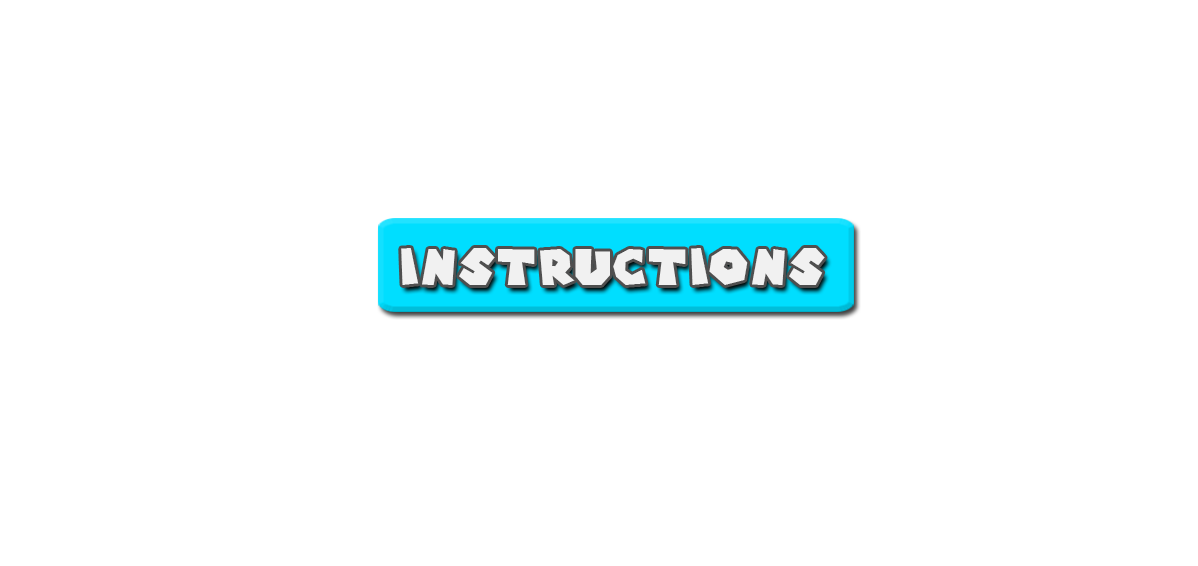
<style>
.page{position:relative;width:1198px;height:566px;background:#ffffff}
.page>*{position:absolute;margin:0}
.t1{font:49.3px "SuperMarioGalaxy";letter-spacing:0.06em;color:#ffffff}
</style>
<div class="page">
<p class="t1" style="left:401px;top:248px;width:424px;height:37px">INSTRUCTIONS</p>
</div>
